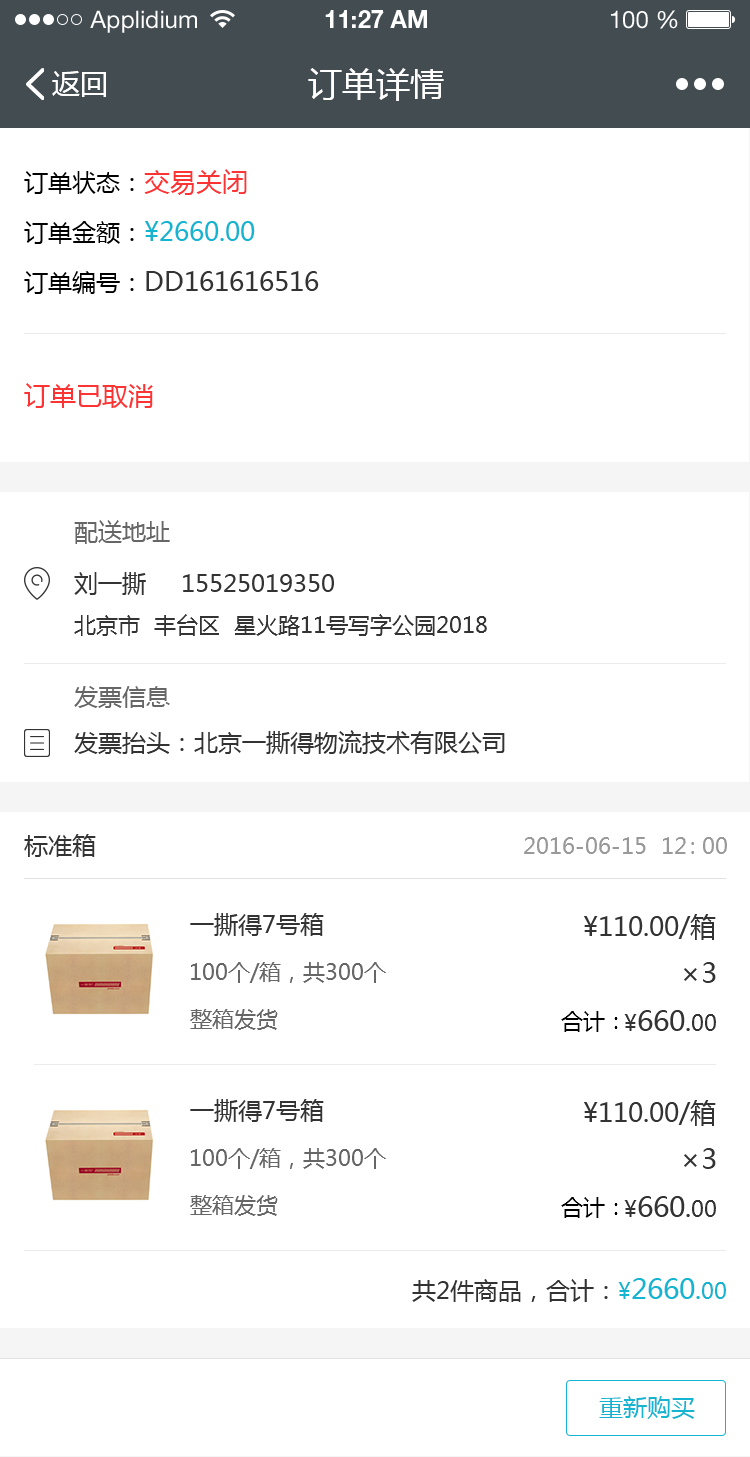
<style>
.page{position:relative;width:750px;height:1457px;background:#ffffff}
.page>*{position:absolute;margin:0}
.t1{font:24px "HelveticaNeueLTStd-Roman";color:#ffffff}
.t2{font:24px "HelveticaNeueLTStd-Bd";color:#ffffff}
.t3{font:28px "MicrosoftYaHei";color:#ffffff}
.t4{font:34px "MicrosoftYaHei";color:#ffffff}
.t5{font:26px/50px "MicrosoftYaHei";color:#333333}
.t6{font:24px/50px "MicrosoftYaHei";color:#000000}
.t7{font:26px/50px "MicrosoftYaHei";color:#fe3333}
.t8{font:26px/50px "MicrosoftYaHei";color:#15b4d0}
.t9{font:26px "MicrosoftYaHei";color:#fe3333}
.t10{font:24px "MicrosoftYaHei";color:#666666}
.t11{font:24px "MicrosoftYaHei";color:#333333}
.t12{font:22px "MicrosoftYaHei";color:#333333}
.t13{font:22px "MicrosoftYaHei";color:#999999}
.t14{font:26px "MicrosoftYaHei";color:#333333}
.t15{font:22px "MicrosoftYaHei";color:#666666}
.t16{font:28px "MicrosoftYaHei";color:#333333}
.t17{font:22px "MicrosoftYaHei";color:#000000}
.t18{font:22px "MicrosoftYaHei";color:#15b4d0}
.t19{font:28px "MicrosoftYaHei";color:#15b4d0}
.t20{font:26px "MicrosoftYaHei";color:#15b4d0}
.t21{font:24px "MicrosoftYaHei";color:#15b4d0}
</style>
<div class="page">
<p class="t1" style="left:90px;top:10px;width:107px;height:23px">Applidium</p>
<p class="t2" style="left:325px;top:10px;width:102px;height:18px">11:27 AM</p>
<p class="t1" style="left:611px;top:10px;width:67px;height:19px">100 %</p>
<p class="t3" style="left:52px;top:71px;width:54px;height:26px">返回</p>
<p class="t4" style="left:308px;top:68px;width:136px;height:33px">订单详情</p>
<p class="t5" style="left:24px;top:169px;width:295px;height:125px"><span class="t6">订单状态：</span><span class="t7">交易关闭<br></span><span class="t6">订单金额：</span><span class="t8">¥2660.00<br></span><span class="t6">订单编号：</span>DD161616516</p>
<p class="t9" style="left:24px;top:383px;width:129px;height:25px">订单已取消</p>
<p class="t10" style="left:74px;top:520px;width:96px;height:24px">配送地址</p>
<p class="t11" style="left:74px;top:572px;width:260px;height:23px">刘一撕     15525019350</p>
<p class="t12" style="left:74px;top:614px;width:413px;height:22px">北京市  丰台区  星火路11号写字公园2018</p>
<p class="t10" style="left:74px;top:686px;width:96px;height:22px">发票信息</p>
<p class="t11" style="left:74px;top:730px;width:431px;height:24px">发票抬头：北京一撕得物流技术有限公司</p>
<p class="t11" style="left:24px;top:834px;width:72px;height:23px">标准箱</p>
<p class="t13" style="left:524px;top:837px;width:203px;height:17px">2016-06-15  12 : 00</p>
<p class="t11" style="left:190px;top:913px;width:134px;height:23px">一撕得7号箱</p>
<p class="t14" style="left:584px;top:914px;width:132px;height:26px">¥110.00/箱</p>
<p class="t15" style="left:191px;top:962px;width:195px;height:21px">100个/箱，共300个</p>
<p class="t16" style="left:684px;top:962px;width:32px;height:21px">×3</p>
<p class="t15" style="left:190px;top:1009px;width:88px;height:21px">整箱发货</p>
<p class="t17" style="left:561px;top:1011px;width:57px;height:21px">合计：</p>
<p class="t16" style="left:624px;top:1010px;width:92px;height:21px"><span class="t12">¥</span>660<span class="t14">.</span><span class="t12">00</span></p>
<p class="t11" style="left:190px;top:1099px;width:134px;height:23px">一撕得7号箱</p>
<p class="t14" style="left:584px;top:1100px;width:132px;height:26px">¥110.00/箱</p>
<p class="t15" style="left:191px;top:1148px;width:195px;height:21px">100个/箱，共300个</p>
<p class="t16" style="left:684px;top:1148px;width:32px;height:21px">×3</p>
<p class="t15" style="left:190px;top:1195px;width:88px;height:21px">整箱发货</p>
<p class="t17" style="left:561px;top:1197px;width:57px;height:21px">合计：</p>
<p class="t16" style="left:624px;top:1196px;width:92px;height:21px"><span class="t12">¥</span>660<span class="t14">.</span><span class="t12">00</span></p>
<p class="t11" style="left:412px;top:1278px;width:314px;height:24px">共2件商品，合计：<span class="t18">¥</span><span class="t19">2660</span><span class="t20">.</span><span class="t18">00</span></p>
<p class="t21" style="left:599px;top:1396px;width:96px;height:23px">重新购买</p>
</div>
